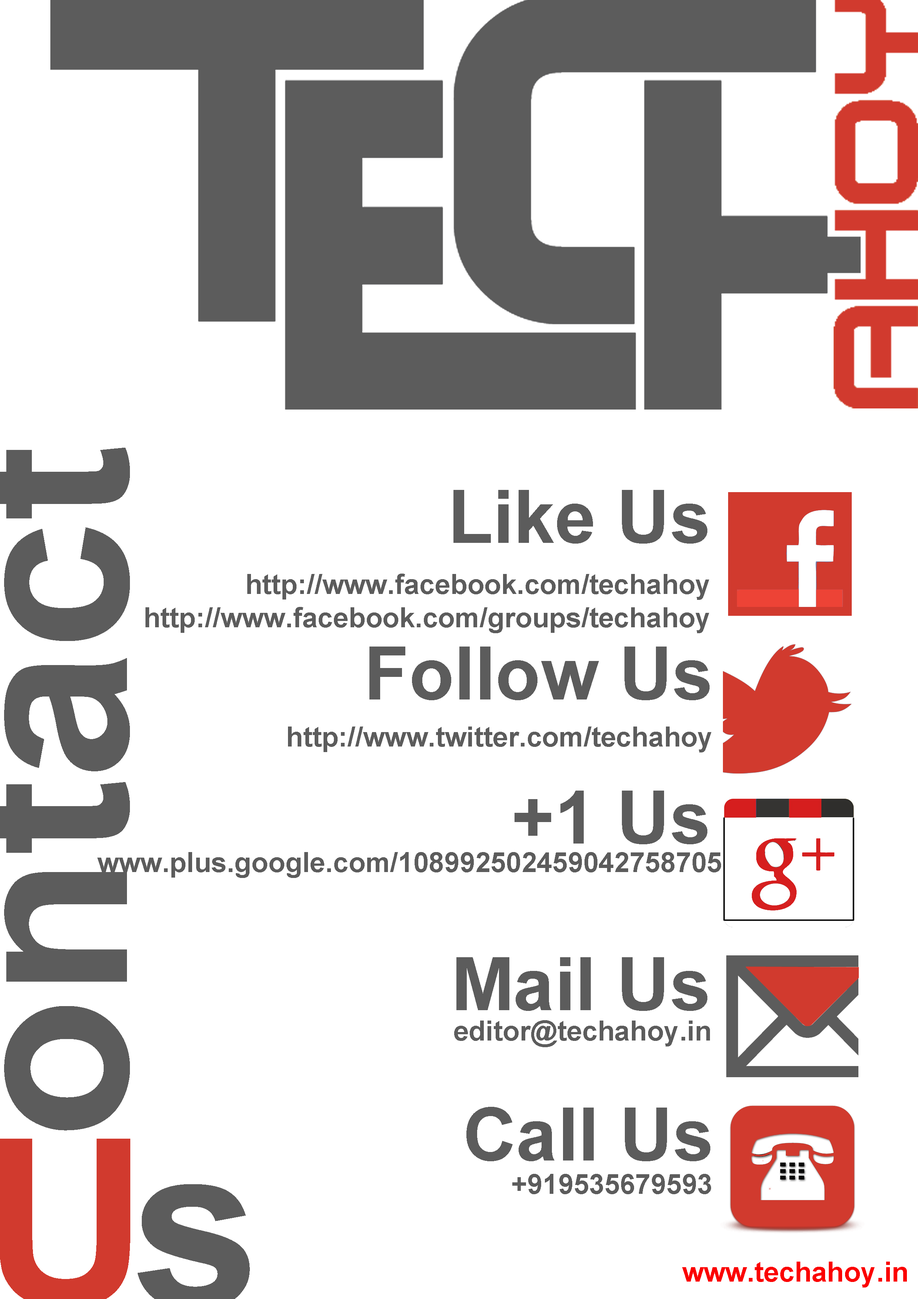
<style>
.page{position:relative;width:918px;height:1299px;background:#ffffff}
.page>*{position:absolute;margin:0}
.t1{font:74px "Arial-BoldMT";color:#5c5c5c}
.t2{font:27.8px "Arial-BoldMT";color:#5c5c5c}
.t3{font:27.8px "Arial-BoldMT";color:#fb0000}
</style>
<div class="page">
<p class="t1" style="left:454px;top:490px;width:253px;height:53px">Like Us</p>
<p class="t2" style="left:145px;top:573px;width:564px;height:60px;text-align:right">http://www.facebook.com/techahoy<br>http://www.facebook.com/groups/techahoy</p>
<p class="t1" style="left:369px;top:646px;width:341px;height:54px">Follow Us</p>
<p class="t2" style="left:288px;top:726px;width:424px;height:26px">http://www.twitter.com/techahoy</p>
<p class="t1" style="left:515px;top:790px;width:192px;height:54px">+1 Us</p>
<p class="t2" style="left:97px;top:852px;width:624px;height:26px">www.plus.google.com/108992502459042758705</p>
<p class="t1" style="left:456px;top:957px;width:251px;height:54px">Mail Us</p>
<p class="t2" style="left:454px;top:1020px;width:256px;height:27px">editor@techahoy.in</p>
<p class="t1" style="left:466px;top:1107px;width:244px;height:54px">Call Us</p>
<p class="t2" style="left:512px;top:1174px;width:199px;height:20px">+919535679593</p>
<p class="t3" style="left:682px;top:1261px;width:225px;height:26px">www.techahoy.in</p>
</div>
